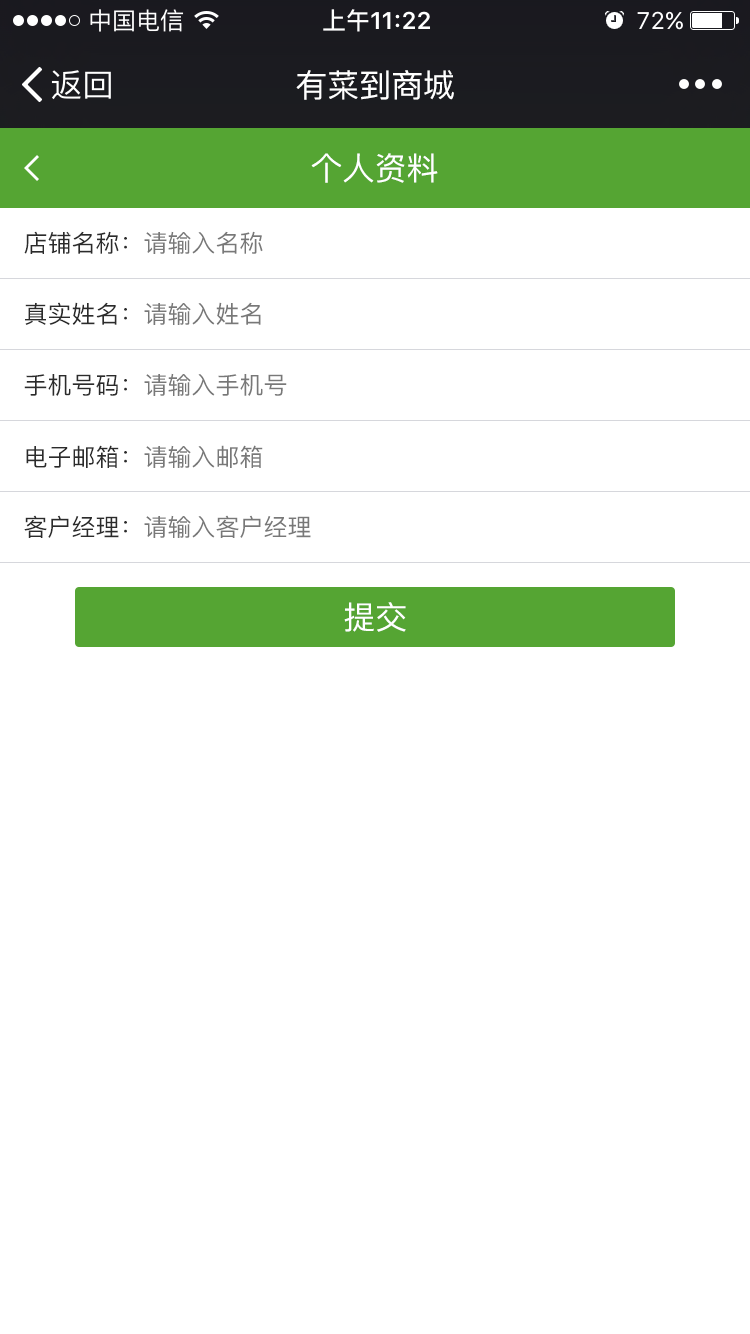
<style>
.page{position:relative;width:750px;height:1334px;background:#ffffff}
.page>*{position:absolute;margin:0}
.t1{font:32px "PingFang-SC-Medium";color:#ffffff}
.t2{font:24px "PingFang-SC-Medium";color:#2b2b2b}
.t3{font:24px "PingFang-SC-Medium";color:#787878}
</style>
<div class="page">
<p class="t1" style="left:296px;top:70px;width:158px;height:30px">有菜到商城</p>
<p class="t1" style="left:311px;top:153px;width:127px;height:30px">个人资料</p>
<p class="t2" style="left:24px;top:231px;width:103px;height:23px">店铺名称：</p>
<p class="t3" style="left:144px;top:231px;width:119px;height:23px">请输入名称</p>
<p class="t2" style="left:25px;top:302px;width:102px;height:23px">真实姓名：</p>
<p class="t3" style="left:144px;top:302px;width:117px;height:23px">请输入姓名</p>
<p class="t2" style="left:24px;top:374px;width:103px;height:22px">手机号码：</p>
<p class="t3" style="left:144px;top:373px;width:143px;height:23px">请输入手机号</p>
<p class="t2" style="left:26px;top:445px;width:101px;height:23px">电子邮箱：</p>
<p class="t3" style="left:144px;top:445px;width:119px;height:23px">请输入邮箱</p>
<p class="t2" style="left:24px;top:515px;width:103px;height:23px">客户经理：</p>
<p class="t3" style="left:144px;top:515px;width:167px;height:23px">请输入客户经理</p>
<p class="t1" style="left:344px;top:602px;width:62px;height:30px">提交</p>
</div>
